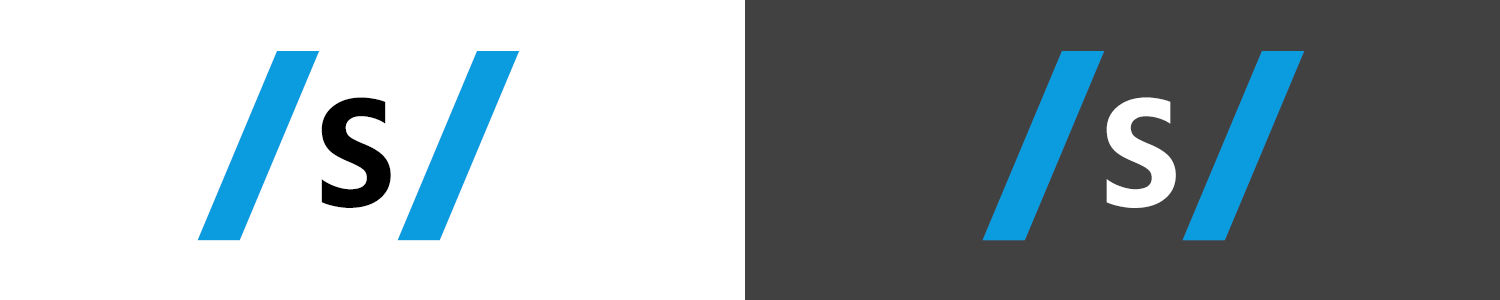
<style>
.page{position:relative;width:1500px;height:300px;background:#ffffff}
.page>*{position:absolute;margin:0}
.t1{font:231.5px "SegoeProBlack";letter-spacing:-0.025em;color:#0b9ce0}
.t2{font:210.4px "SegoePro-Semibold";letter-spacing:-0.025em;color:#000000}
.t3{font:210.4px "SegoePro-Semibold";letter-spacing:-0.025em;color:#ffffff}
</style>
<div class="page">
<p class="t1" style="left:197px;top:51px;width:123px;height:190px">/</p>
<p class="t1" style="left:197px;top:51px;width:123px;height:190px">/</p>
<p class="t1" style="left:197px;top:51px;width:123px;height:190px">/</p>
<p class="t1" style="left:197px;top:51px;width:123px;height:190px">/</p>
<p class="t1" style="left:197px;top:51px;width:123px;height:190px">/</p>
<p class="t1" style="left:397px;top:51px;width:123px;height:190px">/</p>
<p class="t1" style="left:982px;top:51px;width:123px;height:190px">/</p>
<p class="t1" style="left:1182px;top:51px;width:123px;height:190px">/</p>
<p class="t1" style="left:1191px;top:51px;width:123px;height:190px">/</p>
<p class="t1" style="left:1191px;top:51px;width:123px;height:190px">/</p>
<p class="t1" style="left:1191px;top:51px;width:123px;height:190px">/</p>
<p class="t1" style="left:1191px;top:51px;width:123px;height:190px">/</p>
<p class="t2" style="left:321px;top:97px;width:70px;height:111px">s</p>
<p class="t3" style="left:1106px;top:97px;width:70px;height:111px">s</p>
</div>
